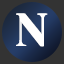
<style>
.page{position:relative;width:64px;height:64px;background:#333333}
.page>*{position:absolute;margin:0}
.t1{font:45.8px "PlayfairDisplay-Bold";color:#ffffff}
</style>
<div class="page">
<p class="t1" style="left:16px;top:13px;width:31px;height:34px">N</p>
<p class="t1" style="left:17px;top:13px;width:31px;height:34px">N</p>
</div>
